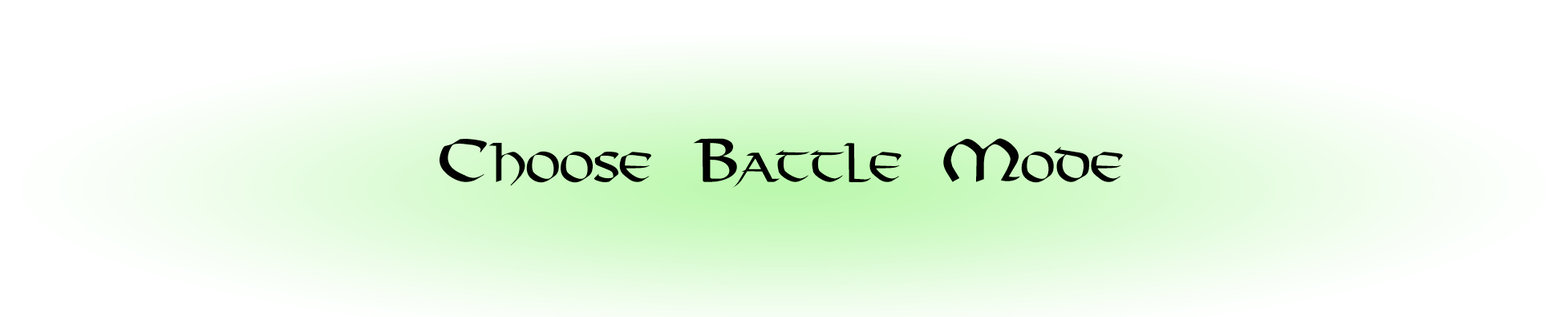
<style>
.page{position:relative;width:1568px;height:317px;background:#ffffff}
.page>*{position:absolute;margin:0}
.t1{font:57.7px "Viking-Medium";color:#000000;font-variant:small-caps}
</style>
<div class="page">
<p class="t1" style="left:440px;top:138px;width:683px;height:50px">Choose Battle Mode</p>
</div>
